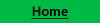
<style>
.page{position:relative;width:100px;height:23px;background:#00ba46}
.page>*{position:absolute;margin:0}
.t1{font:14px "MyriadPro-Semibold";color:#000000;text-decoration:underline}
</style>
<div class="page">
<p class="t1" style="left:31px;top:6px;width:38px;height:13px">Home</p>
</div>
